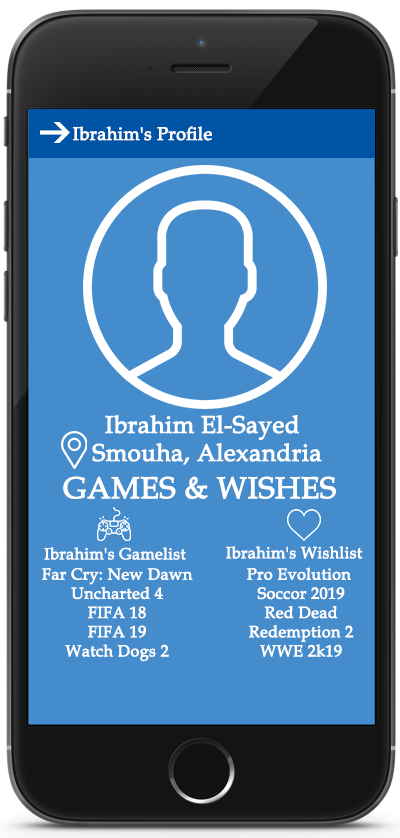
<style>
.page{position:relative;width:400px;height:838px;background:#448ccb}
.page>*{position:absolute;margin:0}
.t1{font:18px "BookAntiqua";color:#ffffff;font-weight:bold}
.t2{font:24px "BookAntiqua";color:#ffffff;font-weight:bold}
.t3{font:30px "BookAntiqua";color:#ffffff;font-weight:bold}
.t4{font:16px "BookAntiqua";color:#ffffff;font-weight:bold}
</style>
<div class="page">
<p class="t1" style="left:73px;top:126px;width:139px;height:15px">Ibrahim's Profile</p>
<p class="t2" style="left:105px;top:415px;width:194px;height:25px">Ibrahim El-Sayed</p>
<p class="t2" style="left:92px;top:443px;width:230px;height:22px">Smouha, Alexandria</p>
<p class="t3" style="left:63px;top:476px;width:273px;height:23px">GAMES &amp; WISHES</p>
<p class="t4" style="left:44px;top:547px;width:142px;height:13px">Ibrahim's Gamelist</p>
<p class="t4" style="left:226px;top:546px;width:137px;height:13px">Ibrahim's Wishlist</p>
<p class="t4" style="left:42px;top:568px;width:151px;height:94px;text-align:center">Far Cry: New Dawn<br>Uncharted 4<br>FIFA 18<br>FIFA 19<br>Watch Dogs 2</p>
<p class="t4" style="left:247px;top:567px;width:107px;height:90px;text-align:center">Pro Evolution <br>Soccor 2019<br>Red Dead<br>Redemption 2<br>WWE 2k19</p>
</div>
